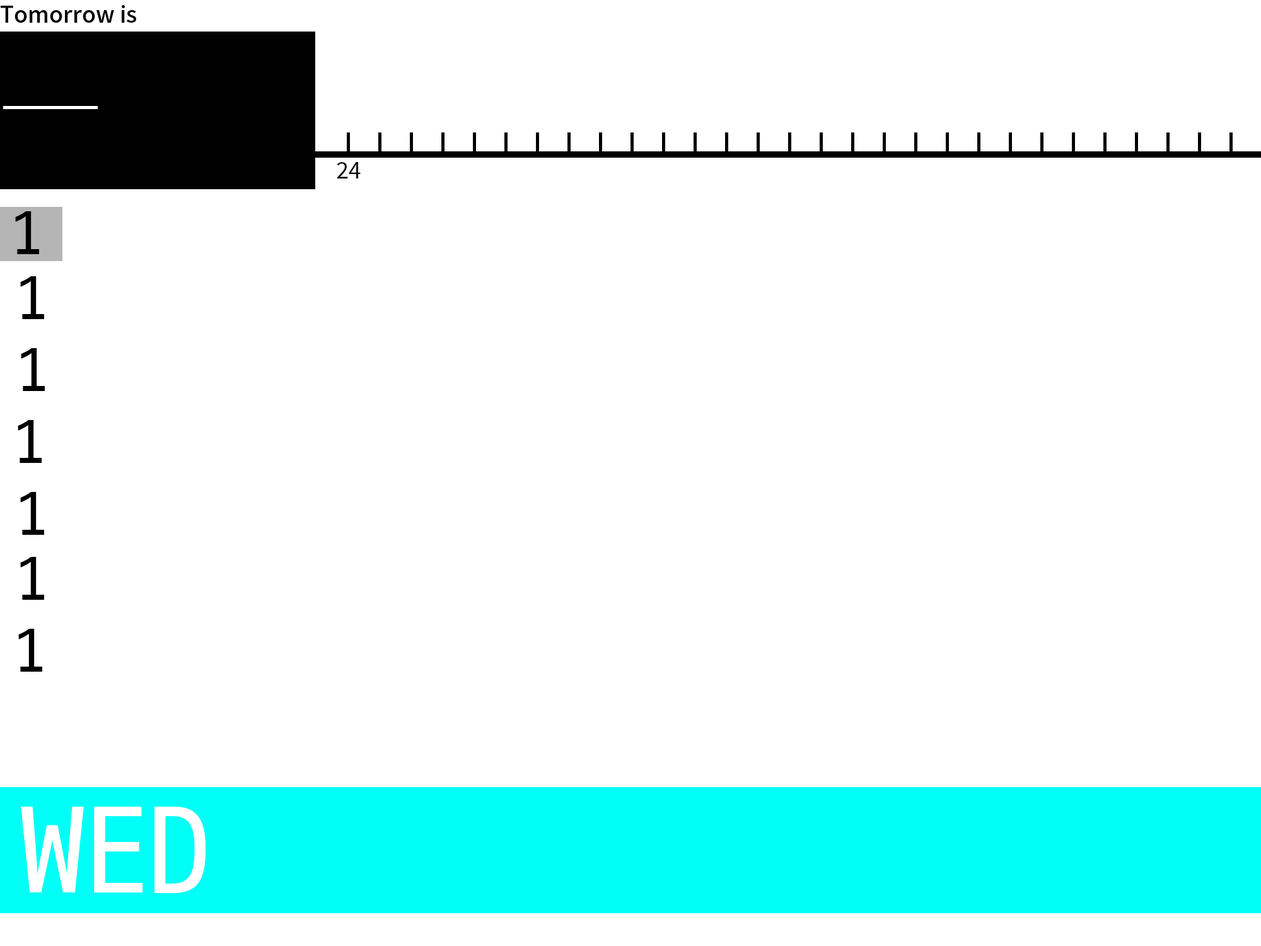
<style>
.page{position:relative;width:1261px;height:946px;background:#ffffff}
.page>*{position:absolute;margin:0}
.t1{font:22.7px "NotoSansKR-Regular";color:#000000}
.t2{font:63px "D2Codingligature";color:#000000}
.t3{font:126.1px "D2Codingligature";color:#ffffff}
</style>
<div class="page">
<p class="t1" style="left:337px;top:162px;width:24px;height:16px">24</p>
<p class="t2" style="left:15px;top:211px;width:24px;height:43px">1</p>
<p class="t2" style="left:20px;top:276px;width:24px;height:43px">1</p>
<p class="t2" style="left:21px;top:348px;width:24px;height:43px">1</p>
<p class="t2" style="left:18px;top:420px;width:24px;height:43px">1</p>
<p class="t2" style="left:20px;top:492px;width:24px;height:43px">1</p>
<p class="t2" style="left:20px;top:557px;width:24px;height:43px">1</p>
<p class="t2" style="left:18px;top:629px;width:24px;height:42px">1</p>
<p class="t3" style="left:21px;top:806px;width:185px;height:87px">WED</p>
</div>
